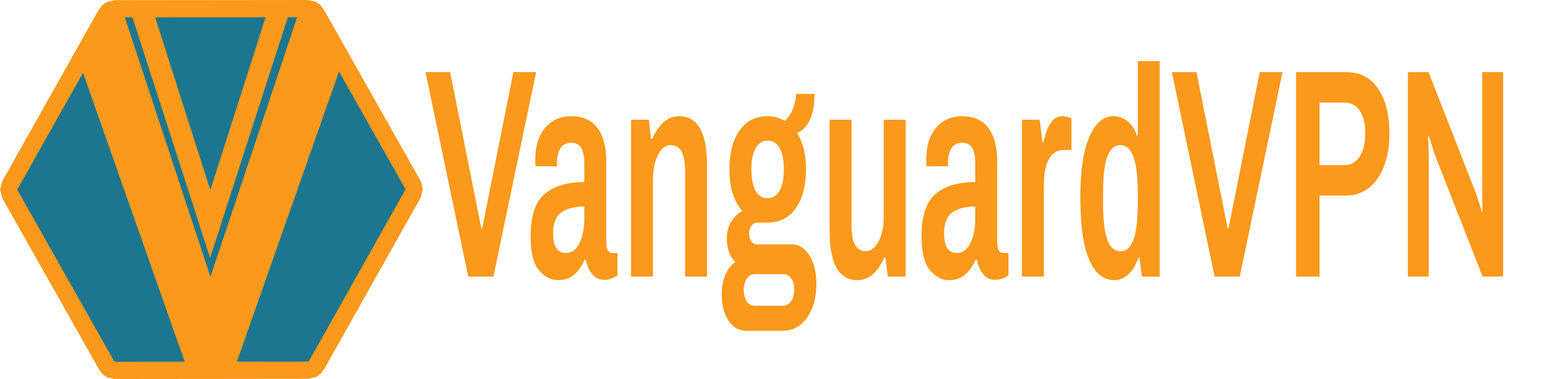
<style>
.page{position:relative;width:1568px;height:379px;background:#ffffff}
.page>*{position:absolute;margin:0}
.t1{font:297.9px "ArchivoNarrow-SemiBold";color:#fa991c;scale:0.69 1}
</style>
<div class="page">
<p class="t1" style="left:425px;top:61px;width:1078px;height:270px">VanguardVPN</p>
</div>
